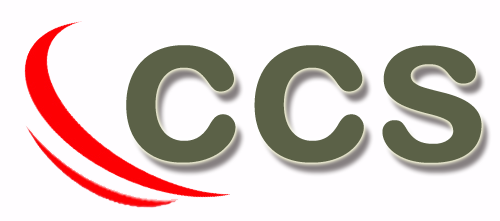
<style>
.page{position:relative;width:500px;height:221px;background:#fffdff}
.page>*{position:absolute;margin:0}
.t1{font:216px "ArialRoundedMTBold";color:#5b6147}
</style>
<div class="page">
<p class="t1" style="left:126px;top:45px;width:356px;height:118px">ccs</p>
</div>
